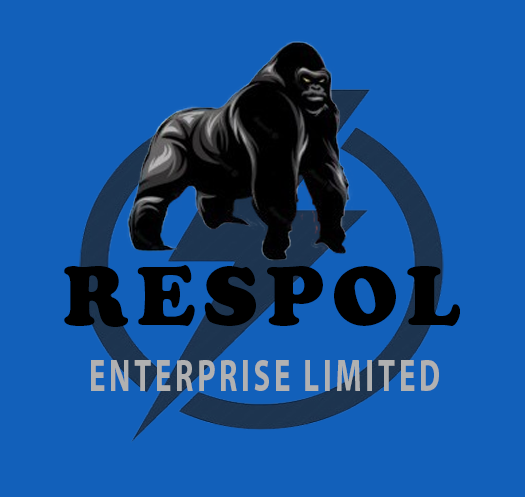
<style>
.page{position:relative;width:525px;height:497px;background:#1260ba}
.page>*{position:absolute;margin:0}
.t1{font:82.7px "CooperBlackStd";letter-spacing:0.1em;color:#000000;text-transform:uppercase}
.t2{font:45.1px "MyriadPro-Bold";letter-spacing:0.1em;color:#b1b1b1;text-transform:uppercase;scale:0.69 1}
</style>
<div class="page">
<p class="t1" style="left:64px;top:265px;width:396px;height:62px">RESPOL</p>
<p class="t2" style="left:91px;top:360px;width:348px;height:31px">Enterprise Limited</p>
</div>
